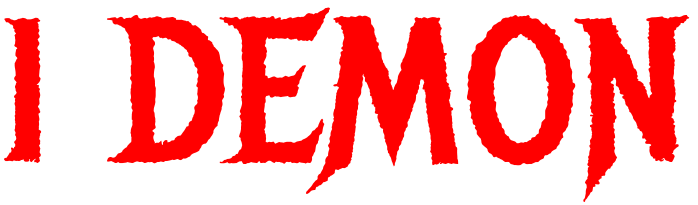
<style>
.page{position:relative;width:698px;height:205px;background:#ffffff}
.page>*{position:absolute;margin:0}
.t1{font:200px "MetalMania-Regular";color:#ff0000}
</style>
<div class="page">
<p class="t1" style="left:4px;top:7px;width:686px;height:195px">I DEMON</p>
</div>
